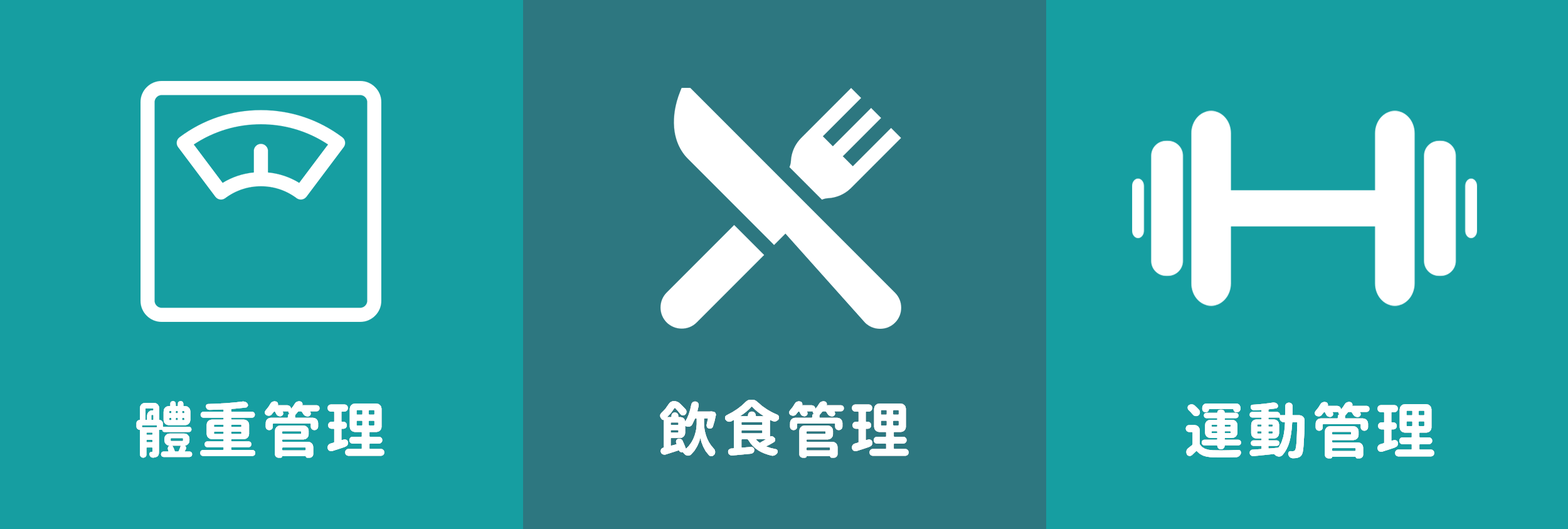
<style>
.page{position:relative;width:1568px;height:529px;background:#169ea1}
.page>*{position:absolute;margin:0}
.t1{font:60.2px "GenJyuuGothicX-Bold";letter-spacing:0.065em;color:#ffffff}
</style>
<div class="page">
<p class="t1" style="left:136px;top:401px;width:248px;height:57px">體重管理</p>
<p class="t1" style="left:660px;top:400px;width:249px;height:58px">飲食管理</p>
<p class="t1" style="left:1185px;top:401px;width:249px;height:57px">運動管理</p>
</div>
